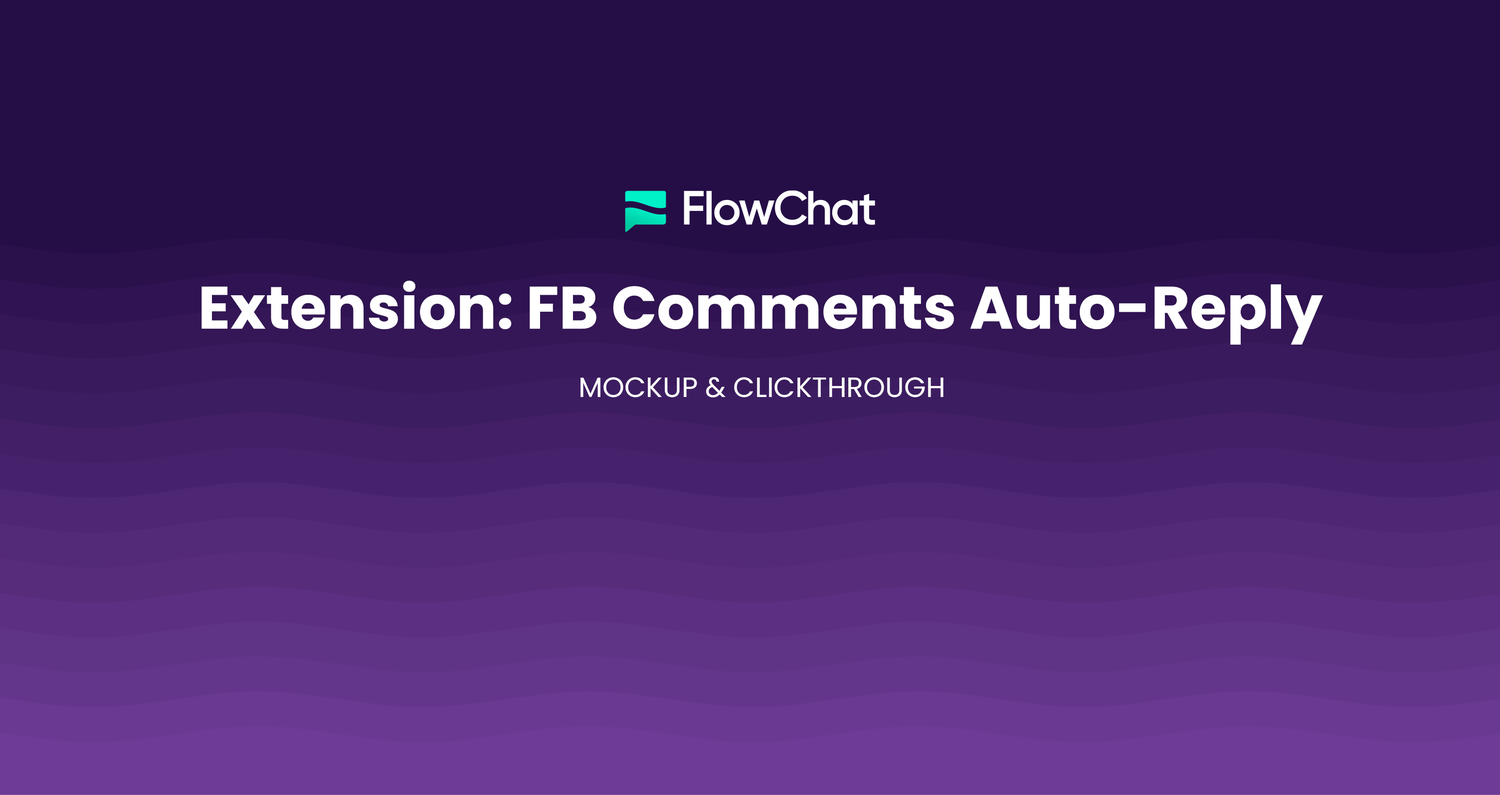
<style>
.page{position:relative;width:1500px;height:795px;background:#250e46}
.page>*{position:absolute;margin:0}
.t1{font:59.8px "Poppins-Bold";color:#ffffff}
.t2{font:27.9px "Poppins-Regular";color:#ffffff;text-transform:uppercase}
</style>
<div class="page">
<p class="t1" style="left:201px;top:280px;width:1122px;height:65px">Extension: FB Comments Auto-Reply</p>
<p class="t2" style="left:580px;top:377px;width:364px;height:20px">MOCKUP &amp; ClickThrough</p>
</div>
